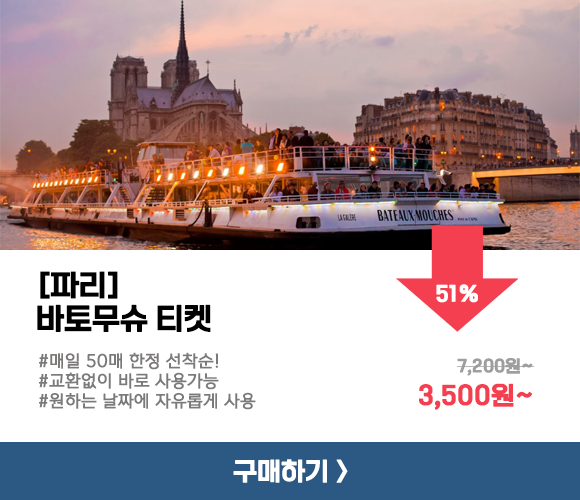
<style>
.page{position:relative;width:580px;height:500px;background:#ffffff}
.page>*{position:absolute;margin:0}
.t1{font:29.2px/33.3px "ONEMobileTitleOTFRegular";letter-spacing:-0.01em;color:#000000;font-weight:bold}
.t2{font:20.8px "ONEMobileTitleOTFRegular";letter-spacing:-0.01em;color:#ffffff;font-weight:bold}
.t3{font:16.7px "ONEMobileOTFRegular";letter-spacing:-0.01em;color:#7c7979;font-weight:bold}
.t4{font:16.7px "ONEMobileTitleOTFRegular";letter-spacing:-0.01em;color:#9f9d9d;font-weight:bold}
.t5{font:25px "ONEMobileTitleOTFRegular";letter-spacing:-0.01em;color:#f33f50;font-weight:bold}
</style>
<div class="page">
<p class="t1" style="left:37px;top:271px;width:174px;height:61px">[파리]<br>바토무슈 티켓</p>
<p class="t2" style="left:436px;top:284px;width:42px;height:19px">51%</p>
<p class="t3" style="left:39px;top:352px;width:217px;height:58px">#매일 50매 한정 선착순!<br>#교환없이 바로 사용가능<br>#원하는 날짜에 자유롭게 사용</p>
<p class="t4" style="left:457px;top:358px;width:78px;height:18px">7,200원~</p>
<p class="t5" style="left:419px;top:383px;width:114px;height:27px">3,500원~</p>
</div>
